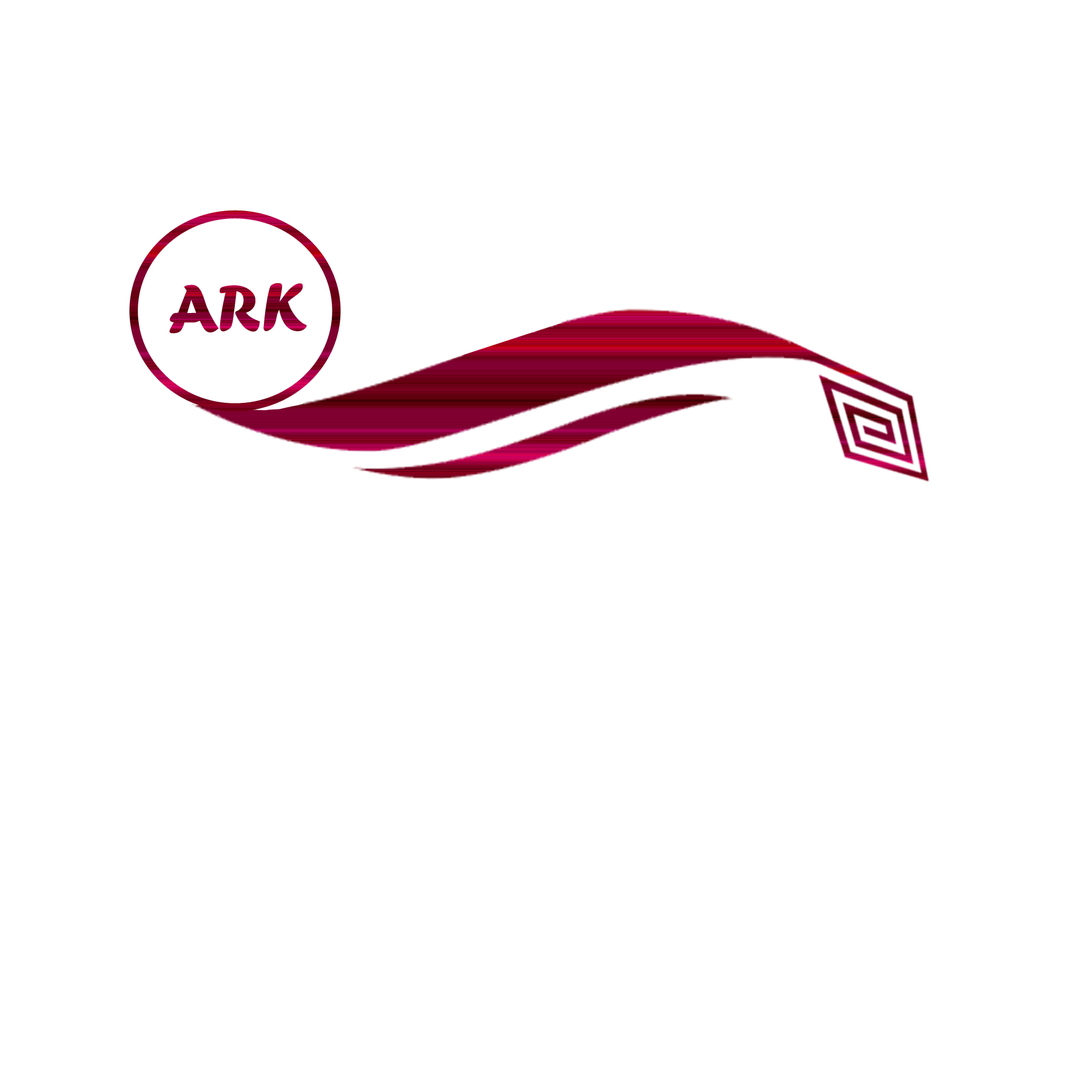
<style>
.page{position:relative;width:1092px;height:1092px;background:#ffffff}
.page>*{position:absolute;margin:0}
.t1{font:71.4px "ForteMT"}
</style>
<div class="page">
<p class="t1" style="left:169px;top:283px;width:138px;height:51px;rotate:-1deg">ARK</p>
</div>
